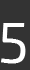
<style>
.page{position:relative;width:30px;height:70px;background:#333333}
.page>*{position:absolute;margin:0}
.t1{font:57px "Exo2-Regular";color:#ffffff}
</style>
<div class="page">
<p class="t1" style="left:1px;top:23px;width:25px;height:41px">5</p>
</div>
